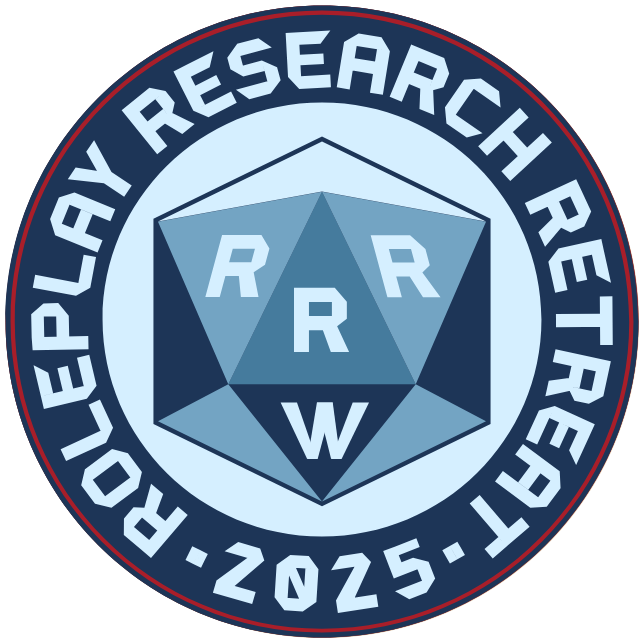
<style>
.page{position:relative;width:644px;height:642px;background:#1d3557}
.page>*{position:absolute;margin:0}
.t1{font:78.8px "FolditThin-Bold";color:#d5efff;text-transform:uppercase}
.t2{font:78.8px "FolditThin-Bold";letter-spacing:0.2em;color:#d5efff;text-transform:uppercase}
</style>
<div class="page">
<p class="t1" style="left:31px;top:30px;width:582px;height:529px;rotate:1deg">Roleplay Research Retreat</p>
<p class="t1" style="left:31px;top:30px;width:582px;height:529px;rotate:1deg">Roleplay Research Retreat</p>
<p class="t2" style="left:185px;top:538px;width:280px;height:75px;rotate:-3deg">•2025•</p>
<p class="t2" style="left:185px;top:538px;width:280px;height:75px;rotate:-3deg">•2025•</p>
</div>
